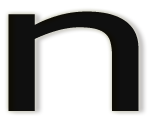
<style>
.page{position:relative;width:150px;height:119px;background:#ffffff}
.page>*{position:absolute;margin:0}
.t1{font:177.2px "Verdana";color:#0f0f0f;scale:1.61 1}
</style>
<div class="page">
<p class="t1" style="left:8px;top:11px;width:131px;height:100px">n</p>
</div>
